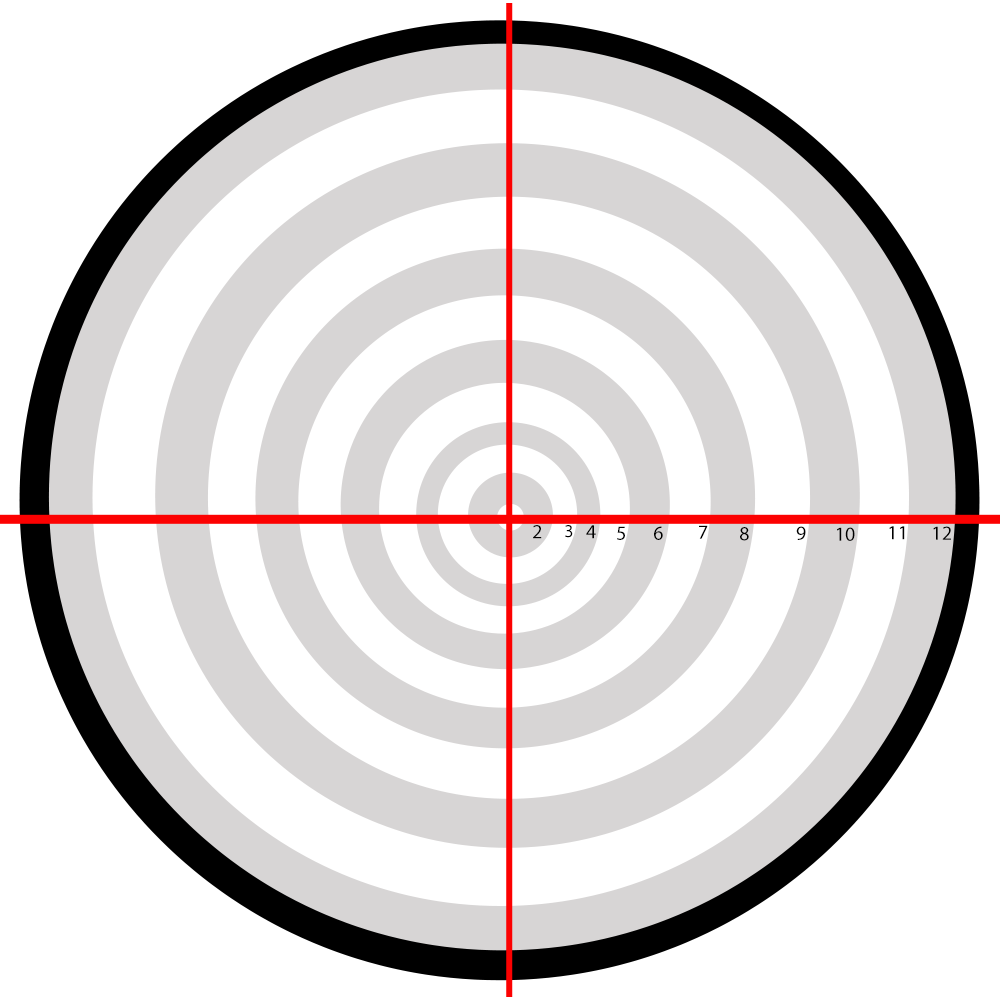
<style>
.page{position:relative;width:1000px;height:1000px;background:#ffffff}
.page>*{position:absolute;margin:0}
.t1{font:20px "MyriadPro-Regular";letter-spacing:0.005em;color:#000000}
.t2{font:18px "MyriadPro-Regular";letter-spacing:0.005em;color:#000000}
</style>
<div class="page">
<p class="t1" style="left:533px;top:525px;width:9px;height:14px">2</p>
<p class="t2" style="left:565px;top:525px;width:8px;height:13px">3</p>
<p class="t1" style="left:586px;top:525px;width:10px;height:14px">4</p>
<p class="t1" style="left:617px;top:526px;width:8px;height:14px">5</p>
<p class="t1" style="left:654px;top:526px;width:9px;height:14px">6</p>
<p class="t1" style="left:699px;top:525px;width:9px;height:14px">7</p>
<p class="t1" style="left:740px;top:527px;width:9px;height:14px">8</p>
<p class="t1" style="left:796px;top:526px;width:10px;height:14px">9</p>
<p class="t1" style="left:837px;top:527px;width:18px;height:14px">10</p>
<p class="t1" style="left:889px;top:526px;width:16px;height:14px">11</p>
<p class="t1" style="left:933px;top:526px;width:18px;height:14px">12</p>
</div>
